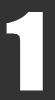
<style>
.page{position:relative;width:55px;height:100px;background:#333333}
.page>*{position:absolute;margin:0}
.t1{font:98px "Impact";color:#ffffff;font-weight:bold}
</style>
<div class="page">
<p class="t1" style="left:6px;top:12px;width:37px;height:79px">1</p>
</div>
